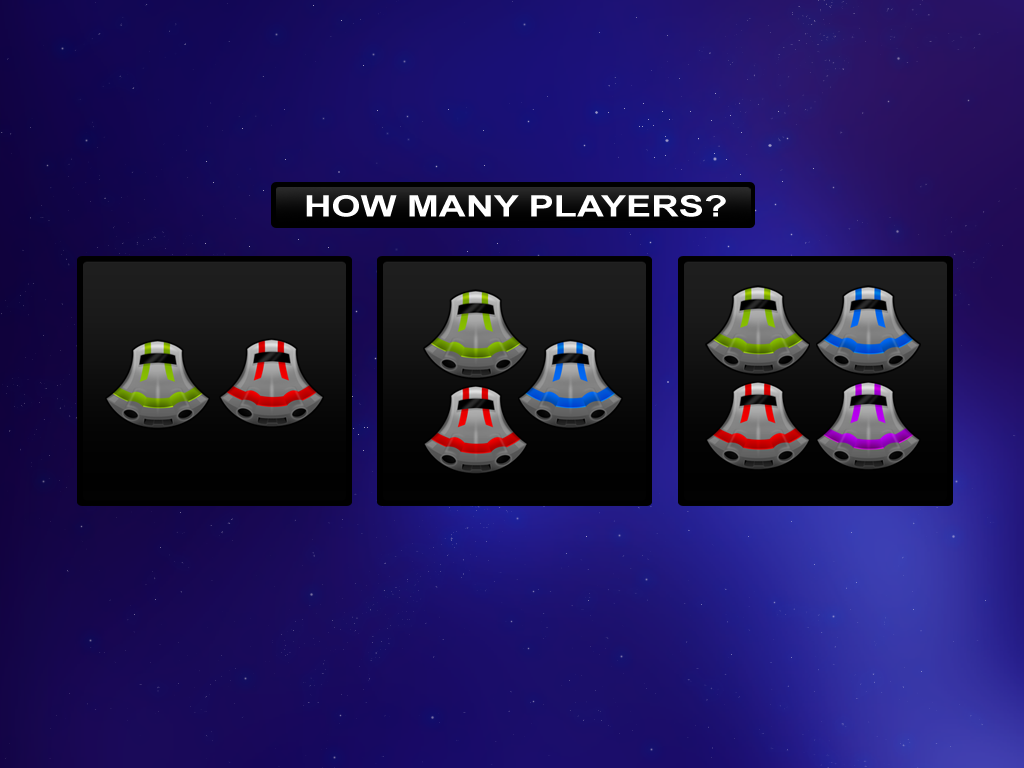
<style>
.page{position:relative;width:1024px;height:768px}
.page>*{position:absolute;margin:0}
.t1{font:29.8px "Arial-BoldMT";color:#ffffff;scale:1.27 1}
</style>
<div class="page">
<p class="t1" style="left:306px;top:195px;width:420px;height:22px">HOW MANY PLAYERS?</p>
</div>
